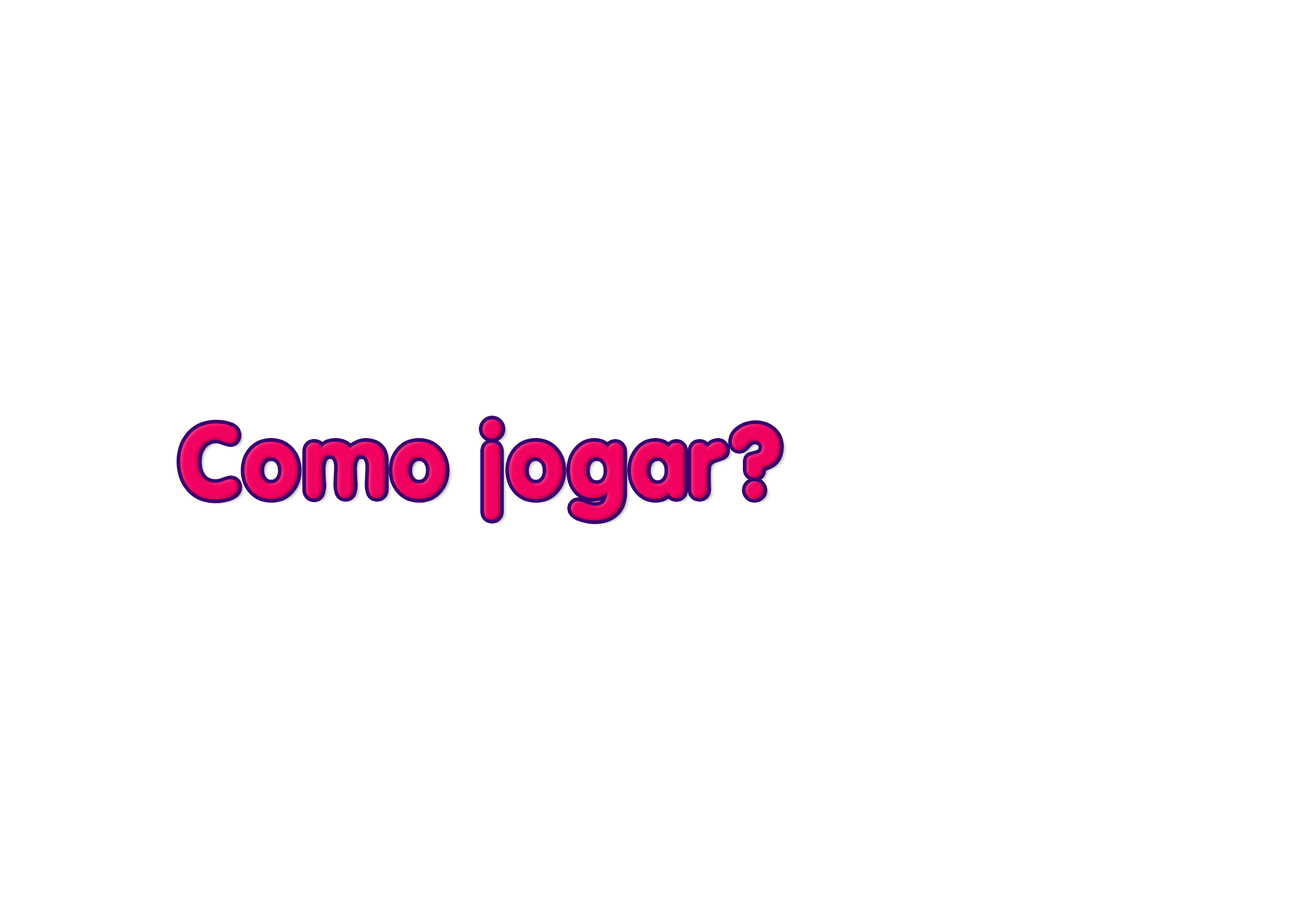
<style>
.page{position:relative;width:1292px;height:923px;background:#ffffff}
.page>*{position:absolute;margin:0}
.t1{font:104.2px "VagBlack";color:#f10160}
</style>
<div class="page">
<p class="t1" style="left:180px;top:419px;width:600px;height:101px">Como jogar?</p>
</div>
